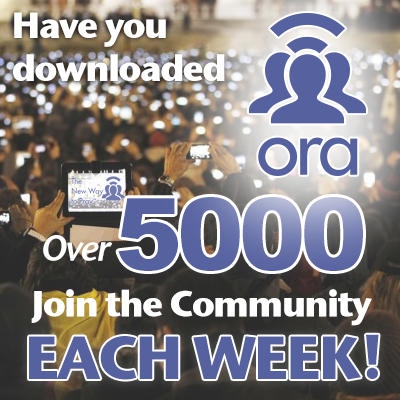
<style>
.page{position:relative;width:400px;height:400px}
.page>*{position:absolute;margin:0}
.t1{font:36px "StoneSansITC-Bold";letter-spacing:-0.05em;color:#ffffff}
.t2{font:100px "Arial-Black";letter-spacing:-0.05em;color:#5661a0}
.t3{font:36px "StoneSansSemITCTTSemiIta";letter-spacing:-0.05em;color:#ffffff}
.t4{font:60px "StoneSansITC-Bold";letter-spacing:-0.05em;color:#5661a0}
</style>
<div class="page">
<p class="t1" style="left:13px;top:12px;width:212px;height:69px">Have you<br>downloaded</p>
<p class="t2" style="left:118px;top:197px;width:245px;height:74px">5000</p>
<p class="t3" style="left:43px;top:235px;width:70px;height:26px">Over</p>
<p class="t1" style="left:31px;top:289px;width:341px;height:37px">Join the Community</p>
<p class="t4" style="left:29px;top:334px;width:350px;height:46px">EACH WEEK!</p>
</div>
